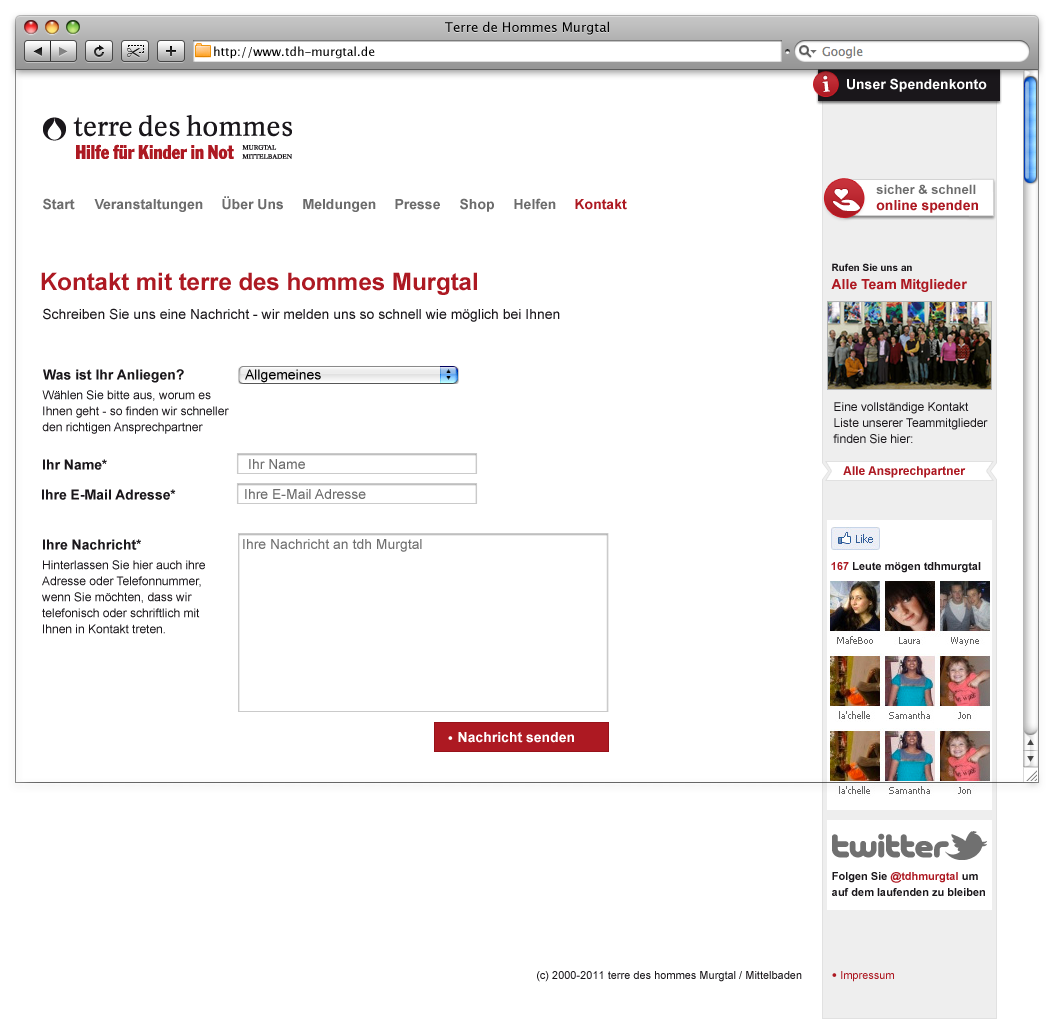
<style>
.page{position:relative;width:1054px;height:1019px;background:#ffffff}
.page>*{position:absolute;margin:0}
.t1{font:13px "LucidaGrande";color:#000000}
.t2{font:12px "LucidaGrande";color:#000000}
.t3{font:21px "Georgia-Bold";color:#ffffff}
.t4{font:14px "Arial-BoldMT";color:#ffffff}
.t5{font:13px/16px "Arial-BoldMT";color:#6c6c6c}
.t6{font:14px/16px "Arial-BoldMT";color:#ad1922}
.t7{font:14px "Arial-BoldMT";color:#6c6c6c}
.t8{font:14px "Arial-BoldMT";color:#ad1922}
.t9{font:14px/18px "Arial-BoldMT";color:#ad1922}
.t10{font:10px/18px "Arial-BoldMT";color:#1a171b}
.t11{font:24px "Arial-BoldMT";color:#ad1922}
.t12{font:14px "ArialMT";color:#1a171b}
.t13{font:14px "Arial-BoldMT";color:#1a171b}
.t14{font:14px "ArialMT";color:#000000}
.t15{font:12px/16px "ArialMT";color:#1a171b}
.t16{font:14px "ArialMT";color:#6c6c6c}
.t17{font:12px "Arial-BoldMT";color:#ad1922}
.t18{font:14px "ArialMT";color:#707070}
.t19{font:11px "Arial-BoldMT";color:#1a171b}
.t20{font:11px "Arial-BoldMT";color:#ad1922}
.t21{font:11px/16px "Arial-BoldMT";color:#1a171b}
.t22{font:11px/16px "Arial-BoldMT";color:#ad1922}
.t23{font:11px "ArialMT";color:#1a171b}
.t24{font:11px "ArialMT";color:#ad1922}
</style>
<div class="page">
<p class="t1" style="left:445px;top:21px;width:164px;height:14px">Terre de Hommes Murgtal</p>
<p class="t2" style="left:214px;top:46px;width:161px;height:13px">http://www.tdh-murgtal.de</p>
<p class="t3" style="left:822px;top:75px;width:8px;height:17px;rotate:-5deg">i</p>
<p class="t4" style="left:847px;top:78px;width:140px;height:14px">Unser Spendenkonto</p>
<p class="t5" style="left:876px;top:184px;width:102px;height:29px">sicher &amp; schnell <br><span class="t6">online spenden</span></p>
<p class="t7" style="left:43px;top:198px;width:32px;height:12px">Start</p>
<p class="t7" style="left:222px;top:196px;width:61px;height:14px">Über Uns</p>
<p class="t7" style="left:460px;top:198px;width:34px;height:14px">Shop</p>
<p class="t7" style="left:514px;top:198px;width:42px;height:12px">Helfen</p>
<p class="t7" style="left:94px;top:199px;width:109px;height:13px">Veranstaltungen</p>
<p class="t7" style="left:303px;top:199px;width:73px;height:13px">Meldungen</p>
<p class="t7" style="left:395px;top:199px;width:45px;height:11px">Presse</p>
<p class="t8" style="left:575px;top:199px;width:52px;height:11px">Kontakt</p>
<p class="t9" style="left:831px;top:263px;width:136px;height:29px"><span class="t10">Rufen Sie uns an<br></span>Alle Team Mitglieder</p>
<p class="t11" style="left:41px;top:272px;width:436px;height:23px">Kontakt mit terre des hommes Murgtal</p>
<p class="t12" style="left:43px;top:308px;width:517px;height:14px">Schreiben Sie uns eine Nachricht - wir melden uns so schnell wie möglich bei Ihnen</p>
<p class="t13" style="left:43px;top:369px;width:141px;height:14px">Was ist Ihr Anliegen?</p>
<p class="t14" style="left:245px;top:369px;width:76px;height:14px">Allgemeines</p>
<p class="t15" style="left:42px;top:390px;width:187px;height:44px">Wählen Sie bitte aus, worum es Ihnen geht - so finden wir schneller den richtigen Ansprechpartner</p>
<p class="t15" style="left:833px;top:402px;width:155px;height:42px">Eine vollständige Kontakt <br>Liste unserer Teammitglieder<br>finden Sie hier:</p>
<p class="t13" style="left:43px;top:459px;width:64px;height:11px">Ihr Name*</p>
<p class="t16" style="left:249px;top:459px;width:56px;height:10px">Ihr Name</p>
<p class="t17" style="left:843px;top:466px;width:123px;height:12px">Alle Ansprechpartner</p>
<p class="t13" style="left:42px;top:489px;width:134px;height:11px">Ihre E-Mail Adresse*</p>
<p class="t16" style="left:245px;top:489px;width:121px;height:10px">Ihre E-Mail Adresse</p>
<p class="t13" style="left:43px;top:539px;width:98px;height:11px">Ihre Nachricht*</p>
<p class="t18" style="left:243px;top:539px;width:179px;height:13px">Ihre Nachricht an tdh Murgtal</p>
<p class="t15" style="left:42px;top:560px;width:163px;height:74px">Hinterlassen Sie hier auch ihre Adresse oder Telefonnummer, wenn Sie möchten, dass wir telefonisch oder schriftlich mit Ihnen in Kontakt treten.</p>
<p class="t19" style="left:831px;top:562px;width:150px;height:11px"><span class="t20">167 </span>Leute mögen tdhmurgtal</p>
<p class="t4" style="left:458px;top:732px;width:116px;height:11px">Nachricht senden</p>
<p class="t21" style="left:832px;top:872px;width:153px;height:24px">Folgen Sie <span class="t22">@tdhmurgtal </span>um <br>auf dem laufenden zu bleiben</p>
<p class="t23" style="left:537px;top:971px;width:265px;height:11px">(c) 2000-2011 terre des hommes Murgtal / Mittelbaden</p>
<p class="t24" style="left:841px;top:971px;width:53px;height:11px">Impressum</p>
</div>
